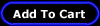
<style>
.page{position:relative;width:100px;height:26px;background:#000000}
.page>*{position:absolute;margin:0}
.t1{font:11px "Verdana-Bold";color:#ffffff}
</style>
<div class="page">
<p class="t1" style="left:13px;top:9px;width:72px;height:10px">Add To Cart</p>
</div>
